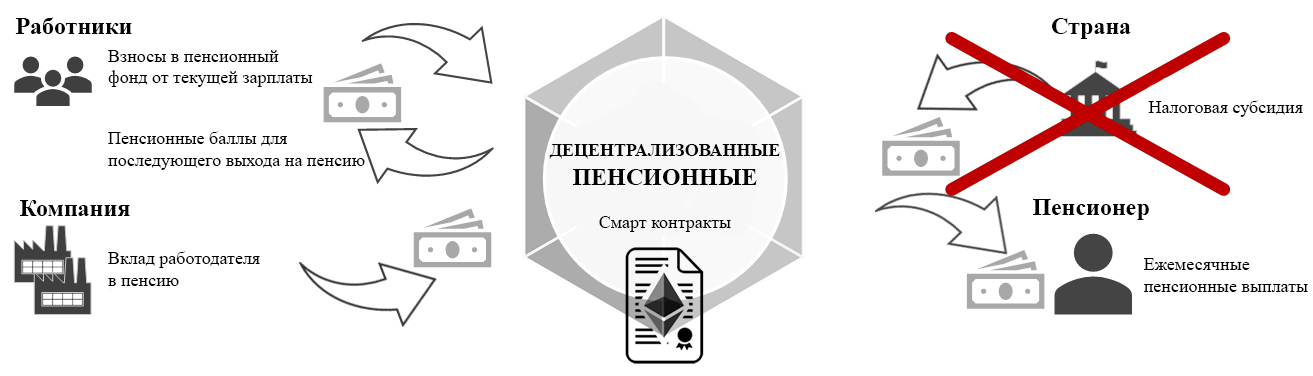
<style>
.page{position:relative;width:1313px;height:376px;background:#ffffff}
.page>*{position:absolute;margin:0}
.t1{font:24px "TimesNewRomanPS-BoldMT";color:#000000}
.t2{font:18px "TimesNewRomanPSMT";color:#000000}
.t3{font:18px "TimesNewRomanPS-BoldMT";color:#000000}
</style>
<div class="page">
<p class="t1" style="left:15px;top:17px;width:117px;height:17px">Работники</p>
<p class="t1" style="left:1052px;top:18px;width:79px;height:21px">Страна</p>
<p class="t2" style="left:108px;top:50px;width:205px;height:37px">Взносы в пенсионный<br>фонд от текущей зарплаты</p>
<p class="t2" style="left:1148px;top:100px;width:155px;height:17px">Налоговая субсидия</p>
<p class="t2" style="left:108px;top:131px;width:257px;height:39px">Пенсионные баллы для<br>последующего выхода на пенсию</p>
<p class="t3" style="left:549px;top:144px;width:231px;height:88px;text-align:center">ДЕЦЕНТРАЛИЗОВАННЫЕ<br><span class="t1">ПЕНСИОННЫЕ<br></span><br><span class="t2">Смарт контракты</span></p>
<p class="t1" style="left:20px;top:200px;width:110px;height:16px">Компания</p>
<p class="t1" style="left:1033px;top:199px;width:116px;height:21px">Пенсионер</p>
<p class="t2" style="left:108px;top:251px;width:152px;height:35px">Вклад работодателя<br>в пенсию</p>
<p class="t2" style="left:1143px;top:258px;width:165px;height:34px">Ежемесячные<br>пенсионные выплаты</p>
</div>
